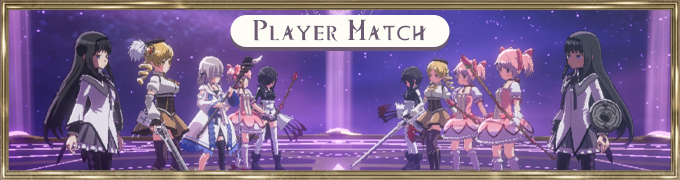
<style>
.page{position:relative;width:680px;height:180px}
.page>*{position:absolute;margin:0}
.t1{font:27.4px "MagiaRecordRegular";color:#6c5a72;font-variant:small-caps;scale:1.25 1}
</style>
<div class="page">
<p class="t1" style="left:252px;top:19px;width:174px;height:23px">Player Match</p>
</div>
